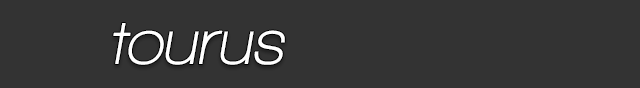
<style>
.page{position:relative;width:640px;height:88px;background:#333333}
.page>*{position:absolute;margin:0}
.t1{font:66.7px "WalkwayBold";letter-spacing:-0.005em;color:#ffffff;font-style:italic}
</style>
<div class="page">
<p class="t1" style="left:113px;top:23px;width:172px;height:42px">tourus</p>
</div>
